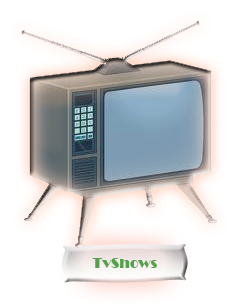
<style>
.page{position:relative;width:235px;height:305px;background:#ffffff}
.page>*{position:absolute;margin:0}
.t1{font:14px "Broadway";color:#55a14b}
</style>
<div class="page">
<p class="t1" style="left:92px;top:258px;width:65px;height:10px">TvShows</p>
</div>
